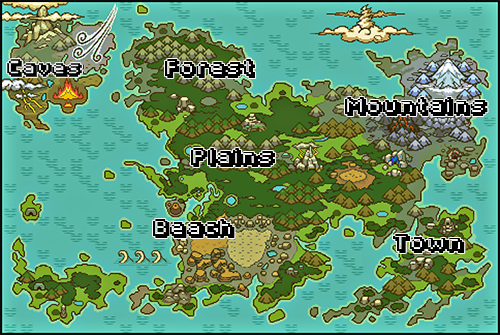
<style>
.page{position:relative;width:500px;height:335px}
.page>*{position:absolute;margin:0}
.t1{font:13.8px "Fipps-Regular";color:#000000;scale:1.09 1}
.t2{font:15.4px "Fipps-Regular";color:#000000;scale:1.09 1}
</style>
<div class="page">
<p class="t1" style="left:7px;top:59px;width:75px;height:18px">Caves</p>
<p class="t2" style="left:165px;top:59px;width:91px;height:19px">Forest</p>
<p class="t2" style="left:345px;top:97px;width:143px;height:19px">Mountains</p>
<p class="t2" style="left:191px;top:148px;width:85px;height:19px">Plains</p>
<p class="t2" style="left:153px;top:219px;width:82px;height:19px">Beach</p>
<p class="t2" style="left:393px;top:234px;width:72px;height:19px">Town</p>
</div>
